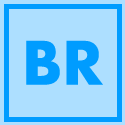
<style>
.page{position:relative;width:125px;height:125px;background:#addfff}
.page>*{position:absolute;margin:0}
.t1{font:58.3px "Futura-Bold";color:#009cff}
</style>
<div class="page">
<p class="t1" style="left:26px;top:40px;width:77px;height:45px">BR</p>
</div>
